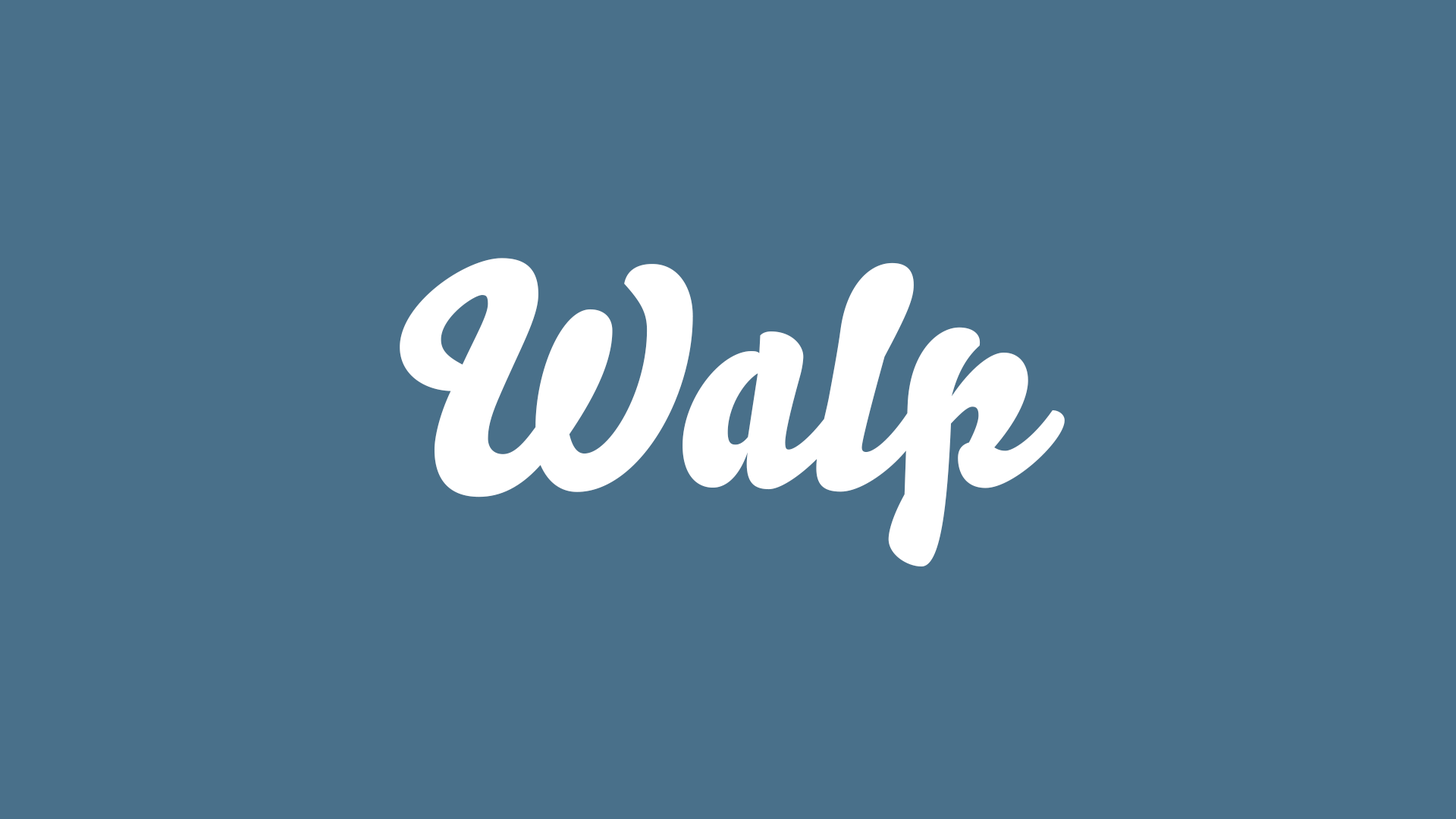
<style>
.page{position:relative;width:1456px;height:819px;background:#49708a}
.page>*{position:absolute;margin:0}
.t1{font:306.7px "Bello-Pro";color:#ffffff}
</style>
<div class="page">
<p class="t1" style="left:400px;top:258px;width:665px;height:308px">Walp</p>
</div>
